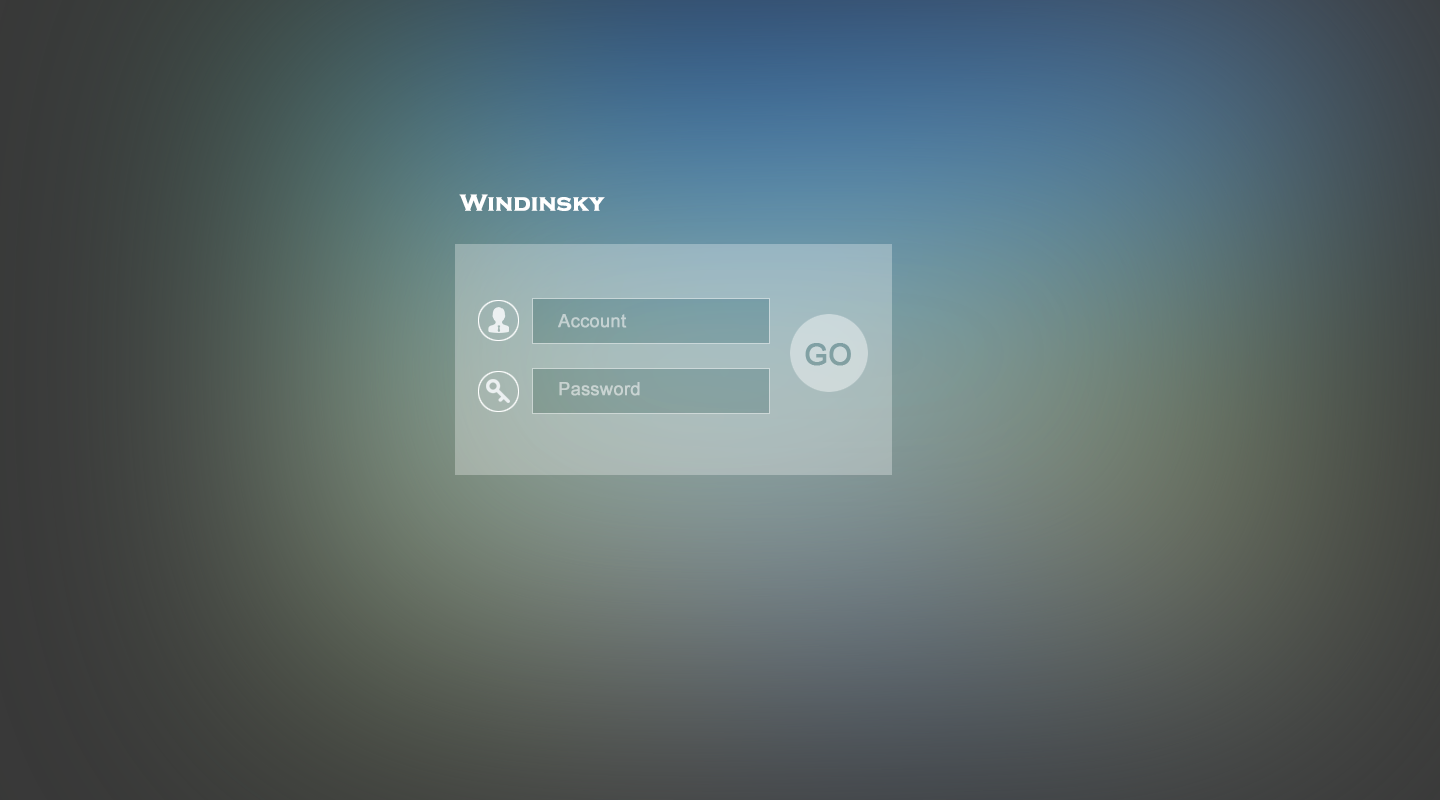
<style>
.page{position:relative;width:1440px;height:800px}
.page>*{position:absolute;margin:0}
.t1{font:24px "CopperplateGothic-Bold";letter-spacing:-0.002em;color:#ffffff;font-weight:bold}
.t2{font:18px "ArialMT";letter-spacing:-0.002em;color:#c5d2d2;font-weight:bold}
.t3{font:18px "ArialMT";letter-spacing:-0.002em;color:#c8d3d1;font-weight:bold}
</style>
<div class="page">
<p class="t1" style="left:459px;top:194px;width:146px;height:17px">Windinsky</p>
<p class="t2" style="left:558px;top:314px;width:69px;height:14px">Account</p>
<p class="t3" style="left:559px;top:382px;width:81px;height:14px">Password</p>
</div>
